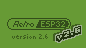
<style>
.page{position:relative;width:86px;height:48px;background:#679a35}
.page>*{position:absolute;margin:0}
.t1{font:8px "Boxy-Bold";color:#20300f;scale:1.06 1}
.t2{font:7px "Picopixel";color:#3f601e}
</style>
<div class="page">
<p class="t1" style="left:56px;top:26px;width:25px;height:16px;rotate:-20deg">v2.6</p>
<p class="t2" style="left:12px;top:34px;width:36px;height:5px">version 2.6</p>
</div>
